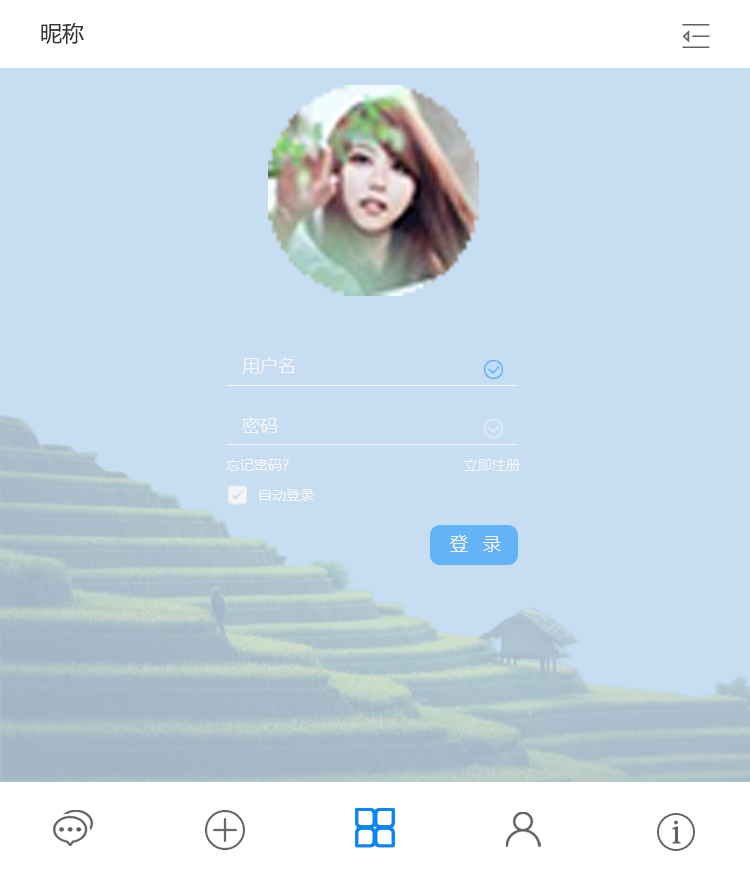
<style>
.page{position:relative;width:750px;height:880px;background:#c7def2}
.page>*{position:absolute;margin:0}
.t1{font:22px "MicrosoftYaHei";color:#323232;text-transform:uppercase}
.t2{font:18px/60px "MicrosoftYaHei";color:#f5f5f5;text-transform:uppercase}
.t3{font:14px/30px "MicrosoftYaHei";color:#f5f5f5;text-transform:uppercase}
.t4{font:18px/50px "MicrosoftYaHei";color:#f5f5f5;text-transform:uppercase}
</style>
<div class="page">
<p class="t1" style="left:41px;top:22px;width:43px;height:22px">昵称</p>
<p class="t2" style="left:242px;top:357px;width:52px;height:77px">用户名<br>密码</p>
<p class="t3" style="left:226px;top:459px;width:294px;height:93px">忘记密码？                                          立即注册<br>        自动登录<br>        <span class="t4">登   录</span></p>
</div>
